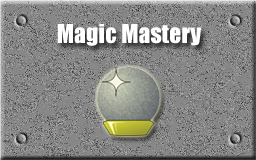
<style>
.page{position:relative;width:256px;height:160px;background:#878787}
.page>*{position:absolute;margin:0}
.t1{font:24px "Impact";color:#ffffff}
</style>
<div class="page">
<p class="t1" style="left:57px;top:24px;width:145px;height:22px">Magic Mastery</p>
</div>
